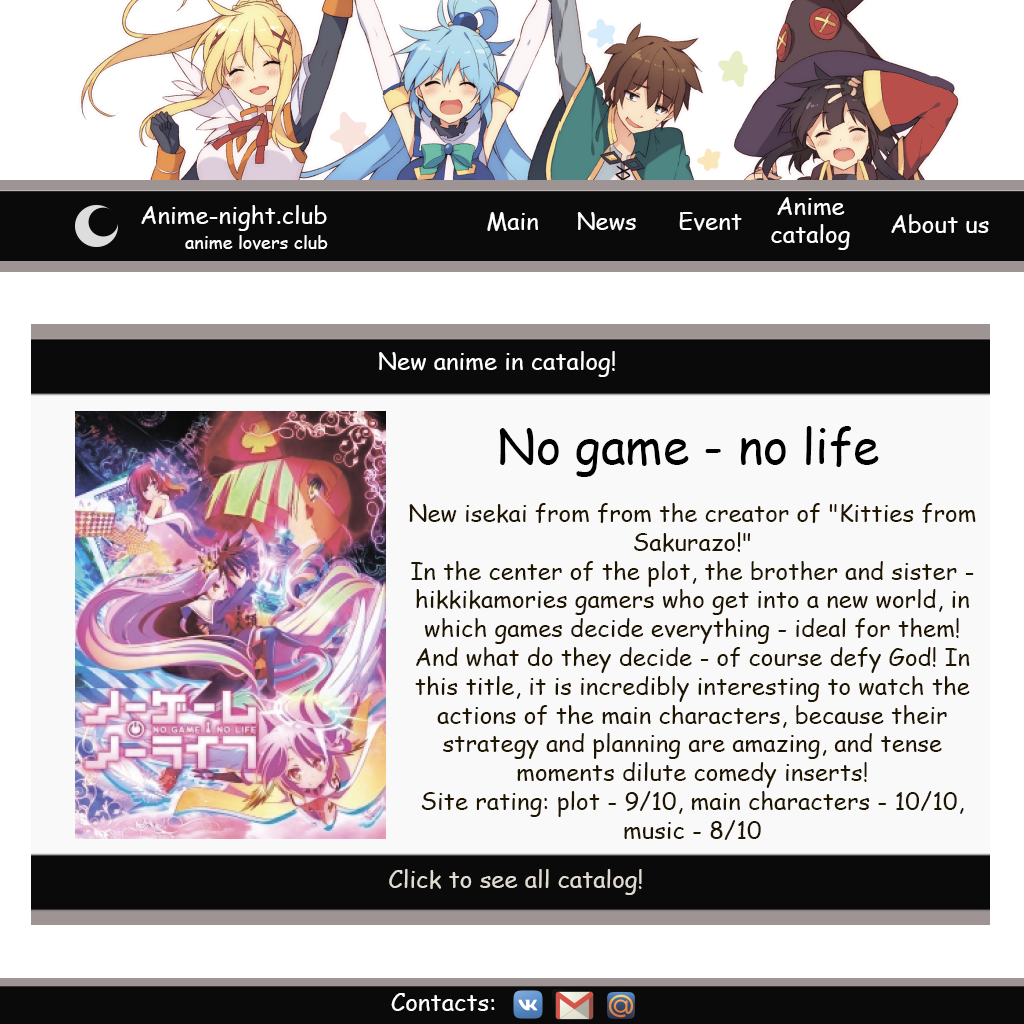
<style>
.page{position:relative;width:1024px;height:1024px;background:#faf9f9}
.page>*{position:absolute;margin:0}
.t1{font:24px "ComicSansMS";color:#ffffff}
.t2{font:18px "ComicSansMS";color:#ffffff}
.t3{font:24px "ComicSansMS";color:#fefefe}
.t4{font:48px "ComicSansMS";color:#000000}
.t5{font:24px "ComicSansMS";color:#201600}
.t6{font:24px "ComicSansMS";color:#e1dcd2}
</style>
<div class="page">
<p class="t1" style="left:771px;top:197px;width:79px;height:53px;text-align:center">Anime<br>catalog</p>
<p class="t1" style="left:141px;top:205px;width:186px;height:26px">Anime-night.club</p>
<p class="t1" style="left:487px;top:212px;width:51px;height:19px">Main</p>
<p class="t1" style="left:577px;top:212px;width:59px;height:19px">News</p>
<p class="t1" style="left:679px;top:212px;width:63px;height:19px">Event</p>
<p class="t1" style="left:891px;top:214px;width:98px;height:19px">About us</p>
<p class="t2" style="left:185px;top:235px;width:143px;height:15px">anime lovers club</p>
<p class="t3" style="left:379px;top:351px;width:236px;height:26px">New anime in catalog!</p>
<p class="t4" style="left:499px;top:426px;width:380px;height:51px">No game - no life</p>
<p class="t5" style="left:409px;top:503px;width:567px;height:337px;text-align:center">New isekai from from the creator of "Kitties from Sakurazo!"<br>In the center of the plot, the brother and sister - hikkikamories gamers who get into a new world, in which games decide everything - ideal for them! And what do they decide - of course defy God! In this title, it is incredibly interesting to watch the actions of the main characters, because their strategy and planning are amazing, and tense moments dilute comedy inserts!<br>Site rating: plot - 9/10, main characters - 10/10, music - 8/10</p>
<p class="t6" style="left:389px;top:869px;width:253px;height:26px">Click to see all catalog!</p>
<p class="t1" style="left:391px;top:993px;width:104px;height:18px">Contacts:</p>
</div>
